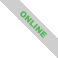
<style>
.page{position:relative;width:58px;height:58px;background:#ffffff}
.page>*{position:absolute;margin:0}
.t1{font:8px "Arial-Black";color:#54b654}
</style>
<div class="page">
<p class="t1" style="left:20px;top:11px;width:28px;height:28px;rotate:45deg">ONLINE</p>
</div>
